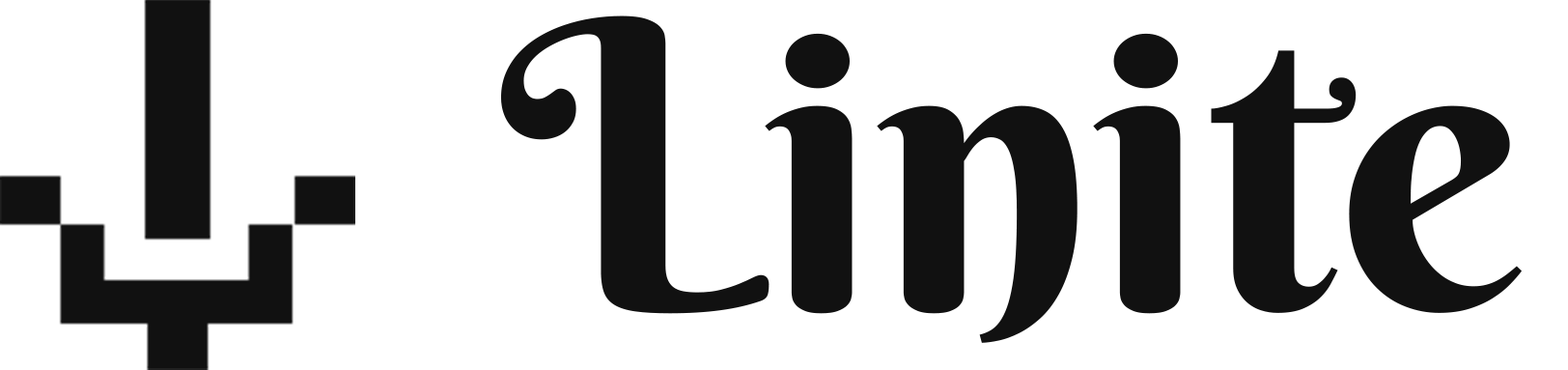
<style>
.page{position:relative;width:1568px;height:370px;background:#ffffff}
.page>*{position:absolute;margin:0}
.t1{font:402.3px "BerkshireSwash-Regular";color:#111111}
</style>
<div class="page">
<p class="t1" style="left:501px;top:15px;width:1021px;height:328px">Linite</p>
</div>
